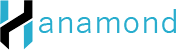
<style>
.page{position:relative;width:180px;height:50px;background:#ffffff}
.page>*{position:absolute;margin:0}
.t1{font:33.3px "YuGothic-Regular";color:#28adce}
</style>
<div class="page">
<p class="t1" style="left:39px;top:9px;width:137px;height:24px">anamond</p>
</div>
